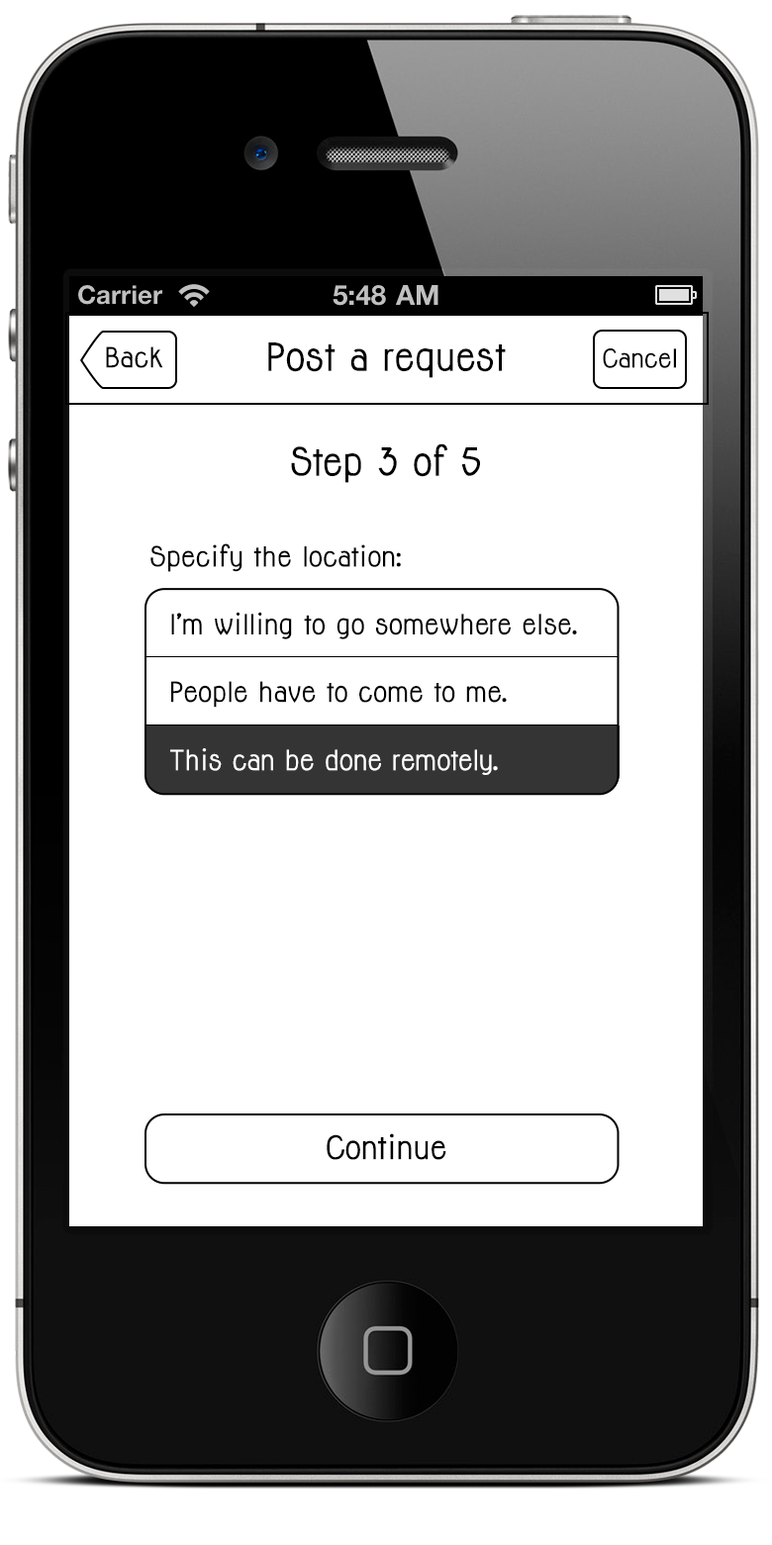
<style>
.page{position:relative;width:772px;height:1545px;background:#ffffff}
.page>*{position:absolute;margin:0}
.t1{font:25.7px "Jolly-Bold";color:#000000}
.t2{font:35.6px "Jolly-Bold";color:#000000}
.t3{font:23.8px "Jolly-Bold";color:#000000}
.t4{font:25.5px "Jolly-Bold";color:#000000}
.t5{font:25.7px "Jolly-Bold";color:#ffffff}
.t6{font:29.8px "Jolly-Bold";color:#000000}
</style>
<div class="page">
<p class="t1" style="left:106px;top:346px;width:57px;height:22px">Back</p>
<p class="t2" style="left:268px;top:342px;width:238px;height:36px">Post a request</p>
<p class="t3" style="left:603px;top:348px;width:73px;height:20px">Cancel</p>
<p class="t2" style="left:291px;top:443px;width:189px;height:40px">Step 3 of 5</p>
<p class="t4" style="left:150px;top:543px;width:251px;height:29px">Specify the location:</p>
<p class="t1" style="left:171px;top:612px;width:406px;height:27px">I’m willing to go somewhere else.</p>
<p class="t1" style="left:171px;top:681px;width:336px;height:27px">People have to come to me.</p>
<p class="t5" style="left:170px;top:748px;width:328px;height:27px">This can be done remotely.</p>
<p class="t6" style="left:327px;top:1133px;width:119px;height:27px">Continue</p>
</div>
